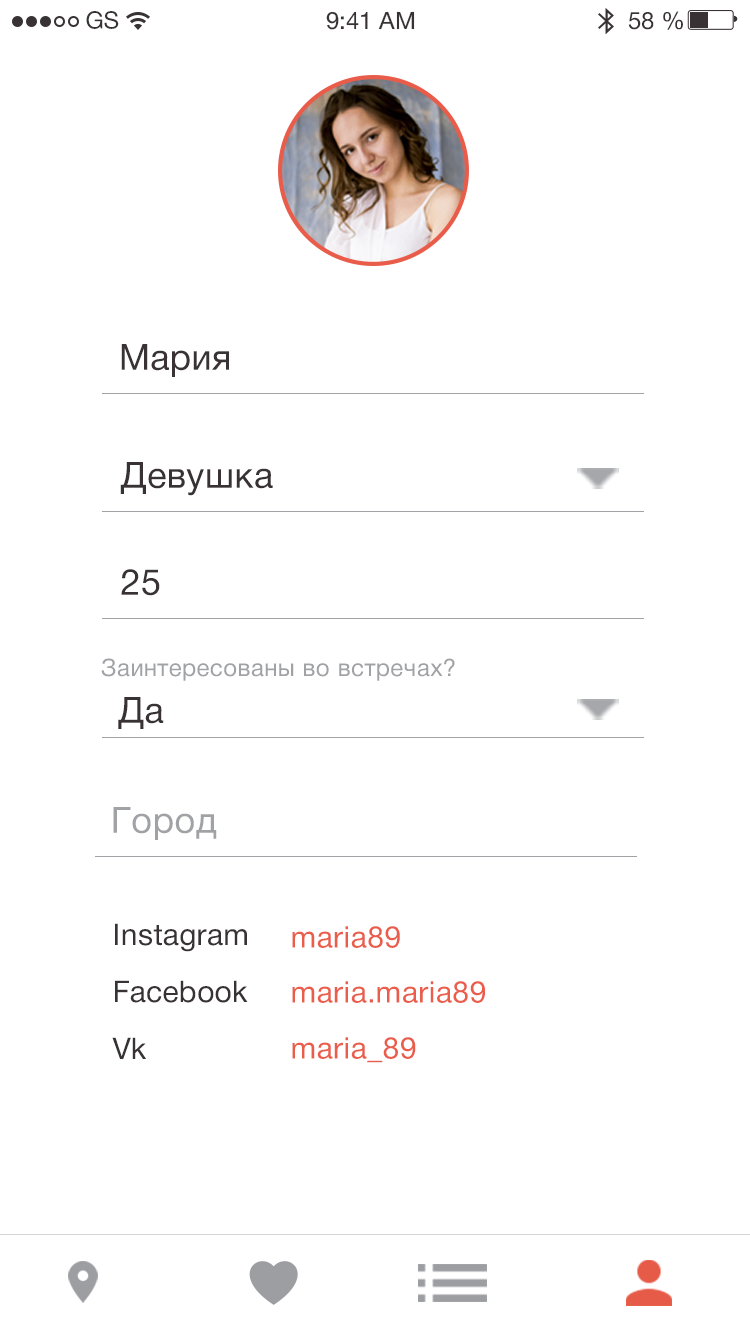
<style>
.page{position:relative;width:750px;height:1335px;background:#ffffff}
.page>*{position:absolute;margin:0}
.t1{font:24px "HelveticaNeueCyr-Roman";color:#383234}
.t2{font:36px "HelveticaNeueCyr-Roman";letter-spacing:0.016em;color:#393335}
.t3{font:36px "HelveticaNeueCyr-Roman";letter-spacing:0.016em;color:#383234}
.t4{font:24px "HelveticaNeueCyr-Roman";letter-spacing:0.016em;color:#a1a2a6}
.t5{font:36px "HelveticaNeueCyr-Roman";letter-spacing:0.016em;color:#a1a2a6}
.t6{font:30px "HelveticaNeueCyr-Roman";letter-spacing:0.012em;color:#383234}
.t7{font:30px "HelveticaNeueCyr-Roman";letter-spacing:0.012em;color:#ea5d4b}
</style>
<div class="page">
<p class="t1" style="left:86px;top:11px;width:33px;height:18px">GS</p>
<p class="t1" style="left:326px;top:11px;width:89px;height:19px">9:41 AM</p>
<p class="t1" style="left:628px;top:11px;width:55px;height:19px">58 %</p>
<p class="t2" style="left:121px;top:344px;width:108px;height:33px">Мария</p>
<p class="t3" style="left:120px;top:462px;width:153px;height:34px">Девушка</p>
<p class="t3" style="left:121px;top:569px;width:39px;height:27px">25</p>
<p class="t4" style="left:101px;top:658px;width:354px;height:23px">Заинтересованы во встречах?</p>
<p class="t3" style="left:118px;top:697px;width:46px;height:32px">Да</p>
<p class="t5" style="left:113px;top:807px;width:104px;height:33px">Город</p>
<p class="t6" style="left:115px;top:923px;width:132px;height:29px">Instagram</p>
<p class="t7" style="left:292px;top:926px;width:108px;height:22px">maria89</p>
<p class="t6" style="left:115px;top:980px;width:133px;height:23px">Facebook</p>
<p class="t7" style="left:292px;top:981px;width:193px;height:22px">maria.maria89</p>
<p class="t6" style="left:112px;top:1037px;width:34px;height:22px">Vk</p>
<p class="t7" style="left:292px;top:1037px;width:124px;height:26px">maria_89</p>
</div>
